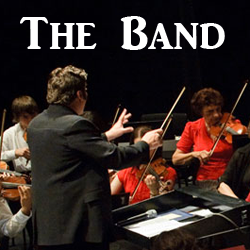
<style>
.page{position:relative;width:250px;height:250px}
.page>*{position:absolute;margin:0}
.t1{font:48px "ARJULIAN";color:#ffffff}
</style>
<div class="page">
<p class="t1" style="left:20px;top:16px;width:205px;height:34px">The Band</p>
</div>
